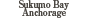
<style>
.page{position:relative;width:88px;height:18px;background:#ffffff}
.page>*{position:absolute;margin:0}
.t1{font:10px/8px "RyuminPro-ExBold";letter-spacing:-0.04em;color:#4c4843;scale:0.9 1}
</style>
<div class="page">
<p class="t1" style="left:18px;top:0px;width:51px;height:18px;text-align:center">Sukumo Bay<br>Anchorage</p>
</div>
